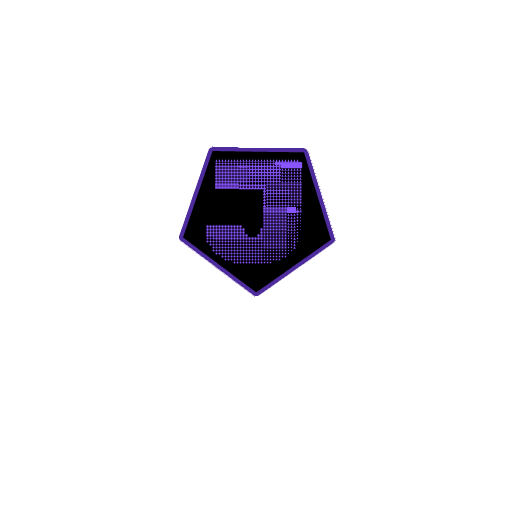
<style>
.page{position:relative;width:512px;height:512px;background:#ffffff}
.page>*{position:absolute;margin:0}
.t1{font:150px "Rubik80sFade-Regular";color:#8955ff}
</style>
<div class="page">
<p class="t1" style="left:206px;top:159px;width:97px;height:105px">J</p>
</div>
